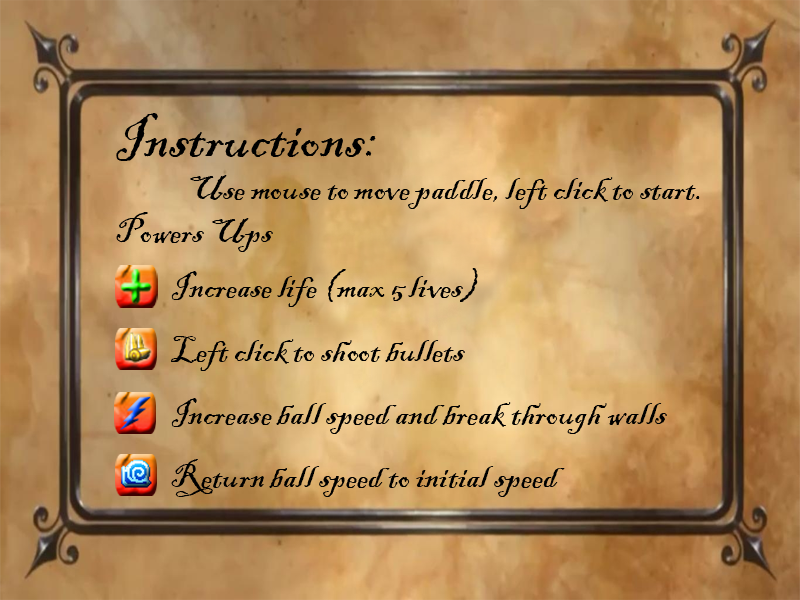
<style>
.page{position:relative;width:800px;height:600px}
.page>*{position:absolute;margin:0}
.t1{font:36px "BlackadderITC-Regular";color:#000000}
.t2{font:60px "BlackadderITC-Regular";color:#000000}
</style>
<div class="page">
<p class="t1" style="left:116px;top:113px;width:584px;height:139px"><span class="t2">Instructions:<br></span>  Use mouse to move paddle, left click to start.<br>Powers Ups</p>
<p class="t1" style="left:171px;top:268px;width:307px;height:39px">Increase life (max 5 lives)</p>
<p class="t1" style="left:171px;top:336px;width:294px;height:35px">Left click to shoot bullets</p>
<p class="t1" style="left:171px;top:398px;width:496px;height:36px">Increase ball speed and break through walls</p>
<p class="t1" style="left:171px;top:459px;width:394px;height:38px">Return ball speed to initial speed</p>
</div>
